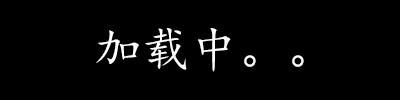
<style>
.page{position:relative;width:400px;height:100px;background:#000000}
.page>*{position:absolute;margin:0}
.t1{font:48px "KaiTi";color:#ffffff}
</style>
<div class="page">
<p class="t1" style="left:96px;top:28px;width:208px;height:44px">加载中。。</p>
</div>
